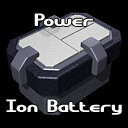
<style>
.page{position:relative;width:128px;height:128px;background:#000000}
.page>*{position:absolute;margin:0}
.t1{font:18px "GravitateBRK";color:#ffffff}
</style>
<div class="page">
<p class="t1" style="left:34px;top:13px;width:60px;height:13px">Power</p>
<p class="t1" style="left:6px;top:99px;width:116px;height:16px">Ion Battery</p>
</div>
